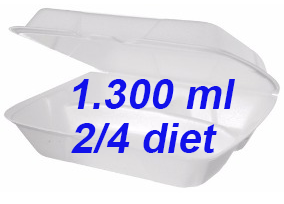
<style>
.page{position:relative;width:284px;height:204px;background:#fefefe}
.page>*{position:absolute;margin:0}
.t1{font:72px "Arial-BoldMT";color:#1111ea;font-style:italic}
</style>
<div class="page">
<p class="t1" style="left:73px;top:79px;width:162px;height:30px">1.300 ml</p>
<p class="t1" style="left:71px;top:123px;width:146px;height:30px">2/4 diet</p>
</div>
